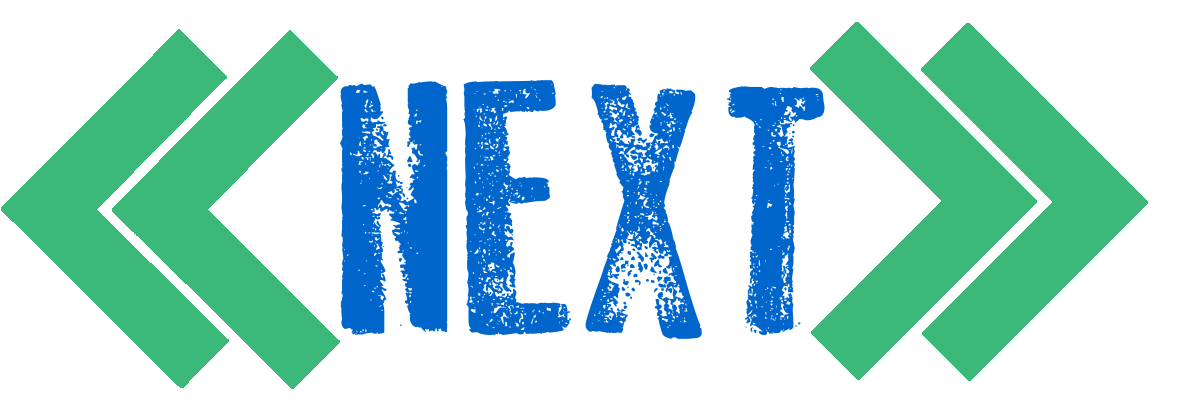
<style>
.page{position:relative;width:1204px;height:401px;background:#ffffff}
.page>*{position:absolute;margin:0}
.t1{font:354px "OldPress";color:#0066cc}
</style>
<div class="page">
<p class="t1" style="left:340px;top:80px;width:485px;height:259px">NEXT</p>
</div>
